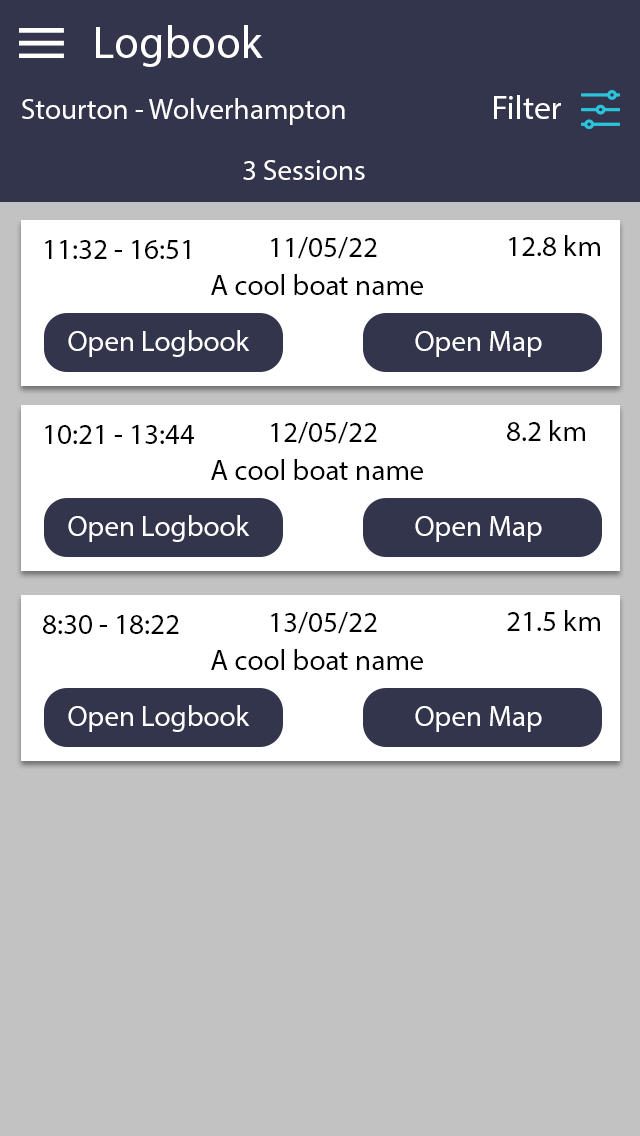
<style>
.page{position:relative;width:640px;height:1136px;background:#c2c2c2}
.page>*{position:absolute;margin:0}
.t1{font:45.8px "MyriadPro-Regular";color:#ffffff}
.t2{font:29.2px "MyriadPro-Regular";color:#ffffff}
.t3{font:33.3px "MyriadPro-Regular";color:#ffffff}
.t4{font:29.2px "MyriadPro-Regular";color:#000000}
</style>
<div class="page">
<p class="t1" style="left:96px;top:25px;width:167px;height:42px">Logbook</p>
<p class="t2" style="left:22px;top:98px;width:323px;height:27px">Stourton - Wolverhampton</p>
<p class="t3" style="left:494px;top:95px;width:67px;height:24px">Filter</p>
<p class="t2" style="left:243px;top:160px;width:122px;height:20px">3 Sessions</p>
<p class="t4" style="left:45px;top:240px;width:145px;height:19px">11:32 - 16:51</p>
<p class="t4" style="left:271px;top:237px;width:106px;height:22px">11/05/22</p>
<p class="t4" style="left:509px;top:235px;width:91px;height:21px">12.8 km</p>
<p class="t4" style="left:211px;top:274px;width:212px;height:21px">A cool boat name</p>
<p class="t2" style="left:68px;top:330px;width:182px;height:27px">Open Logbook</p>
<p class="t2" style="left:415px;top:331px;width:127px;height:26px">Open Map</p>
<p class="t4" style="left:45px;top:425px;width:149px;height:19px">10:21 - 13:44</p>
<p class="t4" style="left:271px;top:422px;width:106px;height:22px">12/05/22</p>
<p class="t4" style="left:507px;top:420px;width:78px;height:21px">8.2 km</p>
<p class="t4" style="left:211px;top:459px;width:212px;height:21px">A cool boat name</p>
<p class="t2" style="left:68px;top:515px;width:182px;height:27px">Open Logbook</p>
<p class="t2" style="left:415px;top:516px;width:127px;height:26px">Open Map</p>
<p class="t4" style="left:43px;top:615px;width:136px;height:19px">8:30 - 18:22</p>
<p class="t4" style="left:271px;top:612px;width:106px;height:22px">13/05/22</p>
<p class="t4" style="left:507px;top:610px;width:93px;height:21px">21.5 km</p>
<p class="t4" style="left:211px;top:649px;width:212px;height:21px">A cool boat name</p>
<p class="t2" style="left:68px;top:705px;width:182px;height:27px">Open Logbook</p>
<p class="t2" style="left:415px;top:706px;width:127px;height:26px">Open Map</p>
</div>
